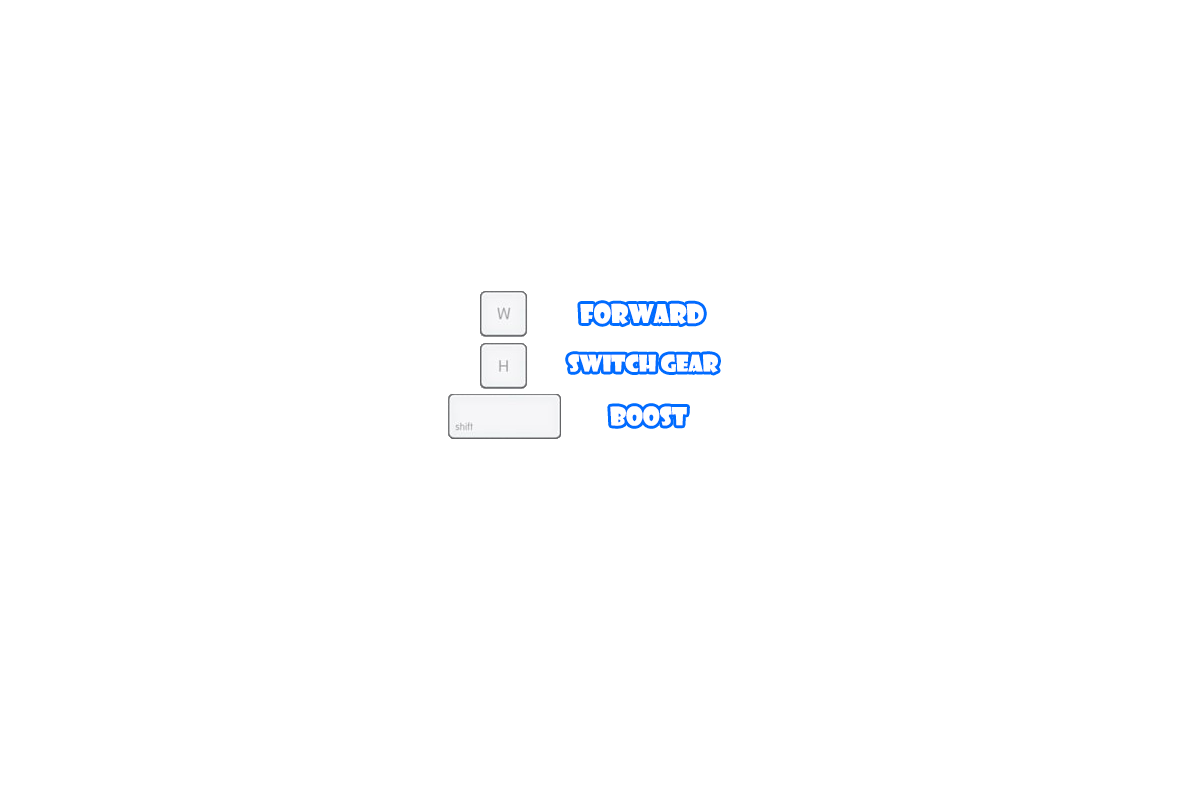
<style>
.page{position:relative;width:1200px;height:800px;background:#ffffff}
.page>*{position:absolute;margin:0}
.t1{font:25px "ShowcardGothic-Reg";color:#ffffff}
.t2{font:22.3px "ShowcardGothic-Reg";color:#ffffff}
.t3{font:24.1px "ShowcardGothic-Reg";color:#ffffff}
</style>
<div class="page">
<p class="t1" style="left:580px;top:303px;width:124px;height:22px">FORWARD</p>
<p class="t2" style="left:568px;top:354px;width:150px;height:19px">SWITCH GEAR</p>
<p class="t3" style="left:610px;top:406px;width:77px;height:20px">BOOST</p>
</div>
